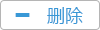
<style>
.page{position:relative;width:100px;height:30px;background:#ffffff}
.page>*{position:absolute;margin:0}
.t1{font:48px "MicrosoftYaHei";color:#3998d6}
.t2{font:18px "MicrosoftYaHei";color:#3998d6}
</style>
<div class="page">
<p class="t1" style="left:15px;top:13px;width:15px;height:4px">-</p>
<p class="t2" style="left:47px;top:7px;width:36px;height:17px">删除</p>
</div>
